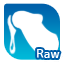
<style>
.page{position:relative;width:64px;height:64px;background:#ffffff}
.page>*{position:absolute;margin:0}
.t1{font:12px "JK-Gothic-M";color:#ffffff}
</style>
<div class="page">
<p class="t1" style="left:37px;top:49px;width:23px;height:9px">Raw</p>
</div>
